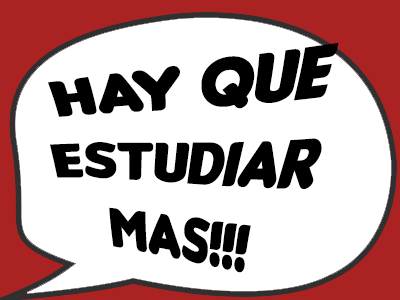
<style>
.page{position:relative;width:400px;height:300px;background:#ffffff}
.page>*{position:absolute;margin:0}
.t1{font:65px "Insaniburger-with-Cheese";color:#000000}
</style>
<div class="page">
<p class="t1" style="left:48px;top:42px;width:291px;height:231px;text-align:center">hay que estudiar<br>mas!!!</p>
</div>
